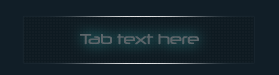
<style>
.page{position:relative;width:279px;height:75px;background:#111e27}
.page>*{position:absolute;margin:0}
.t1{font:13.6px "Neuropol-Regular";color:#5f666b}
</style>
<div class="page">
<p class="t1" style="left:80px;top:34px;width:119px;height:11px">Tab text here</p>
</div>
